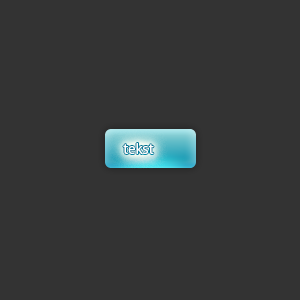
<style>
.page{position:relative;width:300px;height:300px;background:#333333}
.page>*{position:absolute;margin:0}
.t1{font:14px "KozGoPr6N-Regular";color:#ffffff}
</style>
<div class="page">
<p class="t1" style="left:123px;top:143px;width:31px;height:11px">tekst</p>
</div>
